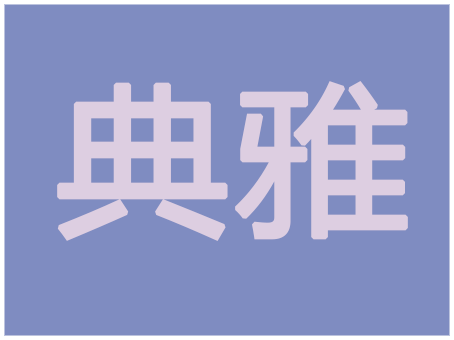
<style>
.page{position:relative;width:454px;height:340px;background:#7f8cc1}
.page>*{position:absolute;margin:0}
.t1{font:160px "MicrosoftYaHei";color:#ddcee1;font-weight:bold;scale:1.1 1}
</style>
<div class="page">
<p class="t1" style="left:57px;top:81px;width:351px;height:160px">典雅</p>
</div>
